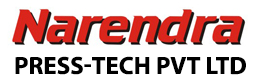
<style>
.page{position:relative;width:260px;height:84px;background:#ffffff}
.page>*{position:absolute;margin:0}
.t1{font:25px "MyriadPro-Bold";color:#000000;text-transform:uppercase}
</style>
<div class="page">
<p class="t1" style="left:15px;top:56px;width:231px;height:19px">Press-Tech Pvt Ltd</p>
</div>
